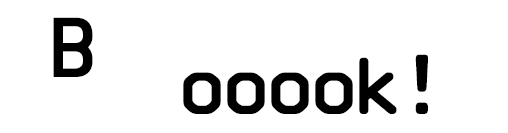
<style>
.page{position:relative;width:508px;height:133px;background:#ffffff}
.page>*{position:absolute;margin:0}
.t1{font:75px "OCRAStd";letter-spacing:-0.16em;color:#000000;font-weight:bold}
</style>
<div class="page">
<p class="t1" style="left:53px;top:17px;width:40px;height:60px">B</p>
<p class="t1" style="left:183px;top:54px;width:245px;height:60px">ooook!</p>
</div>
